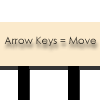
<style>
.page{position:relative;width:100px;height:100px;background:#ffffff}
.page>*{position:absolute;margin:0}
.t1{font:10px "CenturyGothic"}
</style>
<div class="page">
<p class="t1" style="left:4px;top:36px;width:92px;height:10px">Arrow Keys = Move</p>
</div>
